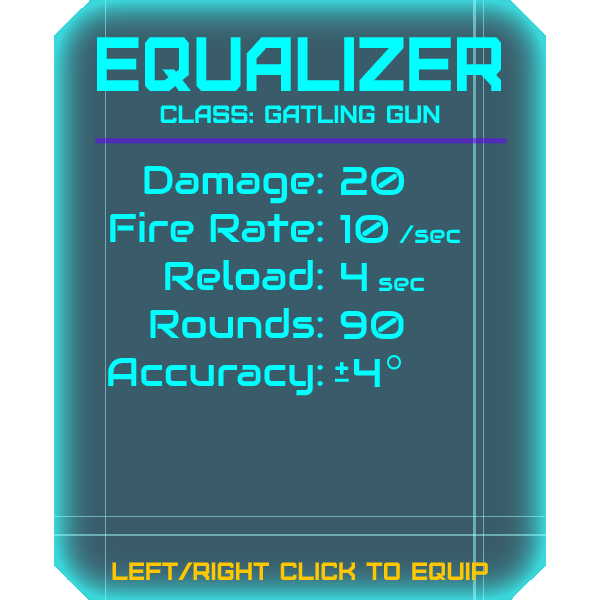
<style>
.page{position:relative;width:600px;height:600px;background:#3a5c6a}
.page>*{position:absolute;margin:0}
.t1{font:76.8px "Furore";color:#00ffff;scale:0.91 1}
.t2{font:25px "Furore";color:#00ffff}
.t3{font:40px "Audiowide-Regular";color:#00ffff}
.t4{font:25px "Audiowide-Regular";color:#00ffff}
.t5{font:25px "Furore";color:#ffc700}
</style>
<div class="page">
<p class="t1" style="left:97px;top:37px;width:404px;height:54px">Equalizer</p>
<p class="t2" style="left:160px;top:105px;width:280px;height:18px">Class: gatling gun</p>
<p class="t3" style="left:108px;top:165px;width:215px;height:231px;text-align:right">Damage:<br>Fire Rate:<br>Reload:<br>Rounds:<br>Accuracy:</p>
<p class="t3" style="left:340px;top:166px;width:120px;height:221px">20<br>10 <span class="t4">/sec<br></span>4 <span class="t4">sec<br></span>90<br> 4</p>
<p class="t5" style="left:112px;top:562px;width:376px;height:18px">left/right click to equip</p>
</div>
